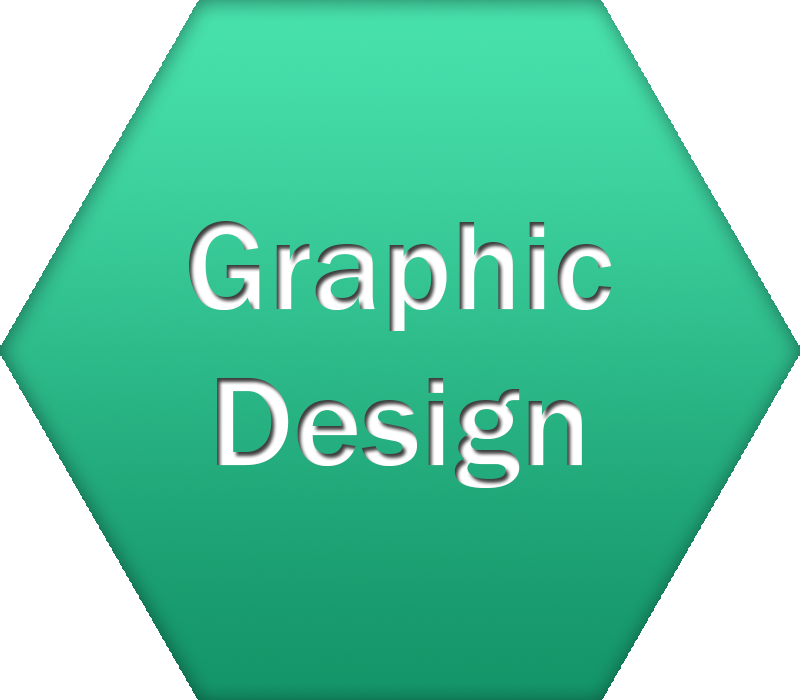
<style>
.page{position:relative;width:800px;height:700px;background:#ffffff}
.page>*{position:absolute;margin:0}
.t1{font:130px "FranklinGothic-Medium"}
</style>
<div class="page">
<p class="t1" style="left:189px;top:221px;width:423px;height:267px;text-align:center">Graphic<br>Design</p>
</div>
